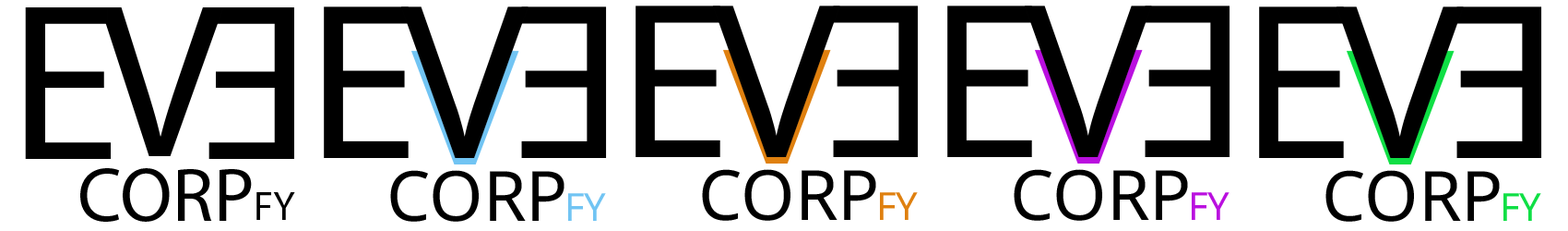
<style>
.page{position:relative;width:1568px;height:231px;background:#ffffff}
.page>*{position:absolute;margin:0}
.t1{font:224.5px "MyriadPro-Regular";color:#000000}
.t2{font:220.5px "MyriadPro-Regular";color:#000000}
.t3{font:76.1px "MyriadPro-Regular";color:#000000}
.t4{font:40px "MyriadPro-Regular";color:#000000}
</style>
<div class="page">
<p class="t1" style="left:25px;top:7px;width:87px;height:152px">E</p>
<p class="t2" style="left:101px;top:7px;width:123px;height:149px">V</p>
<p class="t1" style="left:208px;top:7px;width:86px;height:152px;rotate:180deg">E</p>
<p class="t3" style="left:80px;top:168px;width:172px;height:53px">CORP</p>
<p class="t4" style="left:256px;top:192px;width:39px;height:28px">FY</p>
</div>
